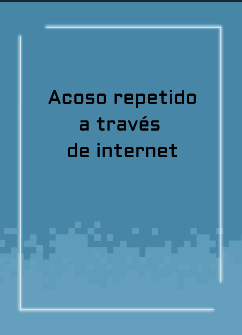
<style>
.page{position:relative;width:242px;height:335px;background:#4786a6}
.page>*{position:absolute;margin:0}
.t1{font:19.2px/26.7px "Aldrich-Regular";letter-spacing:0.005em;color:#000000}
</style>
<div class="page">
<p class="t1" style="left:48px;top:89px;width:148px;height:69px;text-align:center">Acoso repetido<br>a través <br>de internet</p>
</div>
